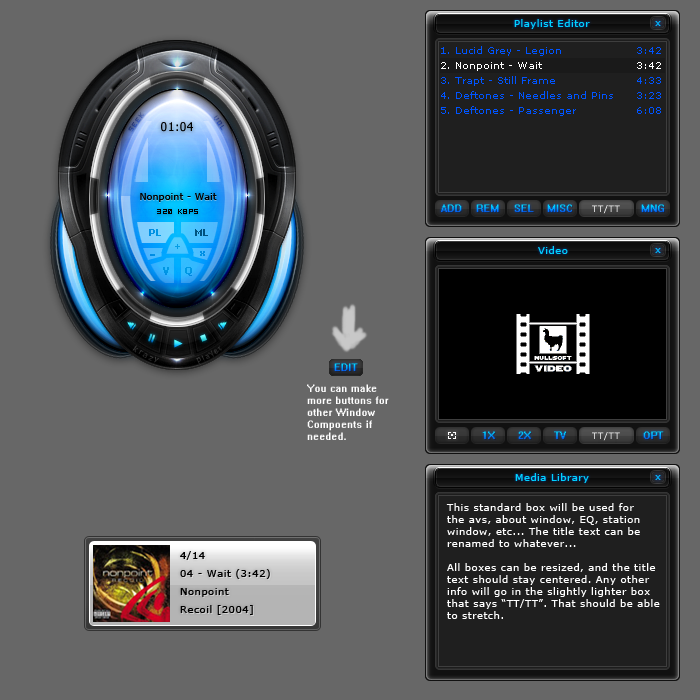
<style>
.page{position:relative;width:700px;height:700px;background:#676767}
.page>*{position:absolute;margin:0}
.t1{font:10px "Verdana";letter-spacing:0.05em;color:#00d2ff}
.t2{font:10px "Verdana";color:#0054ff}
.t3{font:10px "Verdana";color:#ffffff}
.t4{font:12px "Tahoma";letter-spacing:0.05em;color:#000000}
.t5{font:10px "Tahoma";letter-spacing:0.05em;color:#000000}
.t6{font:8px "Serious1";letter-spacing:0.05em;color:#000000}
.t7{font:9px "Verdana-Bold";letter-spacing:0.05em;color:#0092e3}
.t8{font:9px "Verdana-Bold";letter-spacing:0.05em;color:#039fe5}
.t9{font:9px "Verdana-Bold";letter-spacing:0.05em;color:#008fe5}
.t10{font:11px "Verdana-Bold";letter-spacing:0.05em;color:#0097e5}
.t11{font:10px "Verdana-Bold";letter-spacing:0.05em;color:#0098e5}
.t12{font:9px "System";letter-spacing:0.05em}
.t13{font:9px/12px "System";letter-spacing:0.05em;color:#ffffff}
.t14{font:10px/12px "Verdana";letter-spacing:0.05em;color:#ffffff}
.t15{font:10px/18px "Verdana";letter-spacing:0.05em;color:#000000}
</style>
<div class="page">
<p class="t1" style="left:514px;top:19px;width:76px;height:10px">Playlist Editor</p>
<p class="t2" style="left:441px;top:46px;width:220px;height:10px">1. Lucid Grey - Legion      3:42</p>
<p class="t3" style="left:441px;top:62px;width:220px;height:9px">2. Nonpoint - Wait       3:42</p>
<p class="t2" style="left:441px;top:76px;width:220px;height:10px">3. Trapt - Still Frame      4:33</p>
<p class="t2" style="left:441px;top:91px;width:220px;height:8px">4. Deftones - Needles and Pins     3:23</p>
<p class="t2" style="left:441px;top:106px;width:220px;height:10px">5. Deftones - Passenger      6:08</p>
<p class="t4" style="left:161px;top:122px;width:32px;height:10px">01:04</p>
<p class="t5" style="left:140px;top:193px;width:77px;height:9px">Nonpoint - Wait</p>
<p class="t6" style="left:157px;top:209px;width:41px;height:5px">320 kbPs</p>
<p class="t7" style="left:149px;top:229px;width:12px;height:7px">PL</p>
<p class="t8" style="left:175px;top:244px;width:5px;height:5px">+</p>
<p class="t1" style="left:538px;top:246px;width:30px;height:8px">Video</p>
<p class="t9" style="left:200px;top:251px;width:5px;height:5px">x</p>
<p class="t10" style="left:163px;top:267px;width:6px;height:8px">V</p>
<p class="t11" style="left:185px;top:267px;width:7px;height:9px">Q</p>
<p class="t12" style="left:334px;top:363px;width:24px;height:8px">EDIT</p>
<p class="t13" style="left:307px;top:384px;width:82px;height:56px">You can make<br>more buttons for<br>other Window<br>Compoents if<br>needed.</p>
<p class="t1" style="left:515px;top:473px;width:74px;height:10px">Media Library</p>
<p class="t14" style="left:446px;top:503px;width:214px;height:116px">This standard box will be used for<br>the avs, about window, EQ, station<br>window, etc... The title text can be<br>renamed to whatever...<br><br>All boxes can be resized, and the title<br>text should stay centered. Any other<br>info will go in the slightly lighter box<br>that says “TT/TT”. That should be able<br>to stretch.</p>
<p class="t15" style="left:180px;top:551px;width:90px;height:64px">4/14<br>04 - Wait (3:42)<br>Nonpoint<br>Recoil [2004]</p>
</div>
